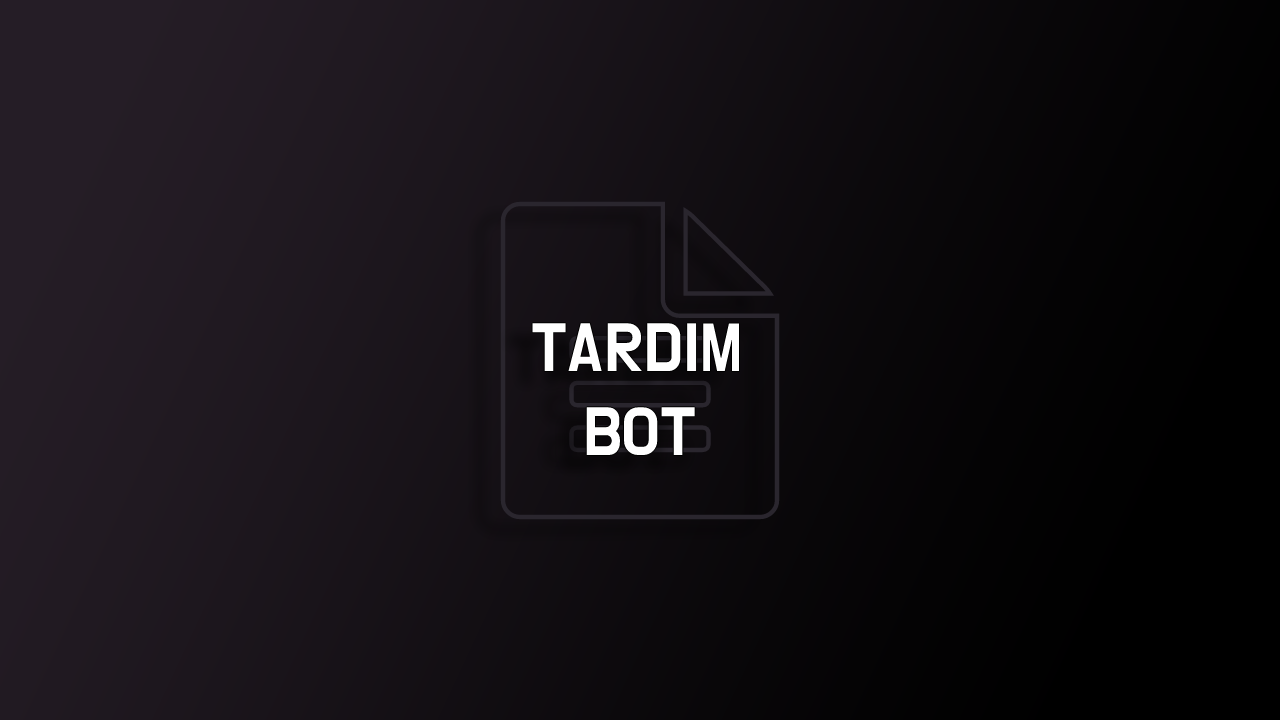
<style>
.page{position:relative;width:1280px;height:720px}
.page>*{position:absolute;margin:0}
.t1{font:70px "DoHyeon-Regular";color:#ffffff}
</style>
<div class="page">
<p class="t1" style="left:532px;top:323px;width:207px;height:132px">TARDIM<br> BOT</p>
</div>
